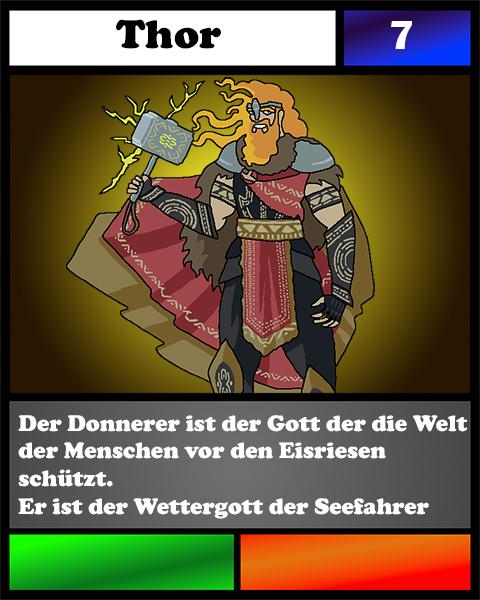
<style>
.page{position:relative;width:480px;height:600px}
.page>*{position:absolute;margin:0}
.t1{font:41.7px "CooperBlack";color:#000000}
.t2{font:41.7px "BritannicBold";color:#ffffff}
.t3{font:23.1px "CooperBlack";color:#ffffff}
</style>
<div class="page">
<p class="t1" style="left:116px;top:19px;width:105px;height:30px">Thor</p>
<p class="t2" style="left:391px;top:21px;width:21px;height:28px">7</p>
<p class="t3" style="left:18px;top:415px;width:449px;height:104px">Der Donnerer ist der Gott der die Welt<br>der Menschen vor den Eisriesen <br>schützt.<br>Er ist der Wettergott der Seefahrer</p>
</div>
